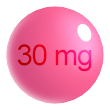
<style>
.page{position:relative;width:110px;height:110px;background:#ffffff}
.page>*{position:absolute;margin:0}
.t1{font:29.3px "ArialMT";letter-spacing:-0.04em}
</style>
<div class="page">
<p class="t1" style="left:17px;top:44px;width:75px;height:28px">30 mg</p>
</div>
